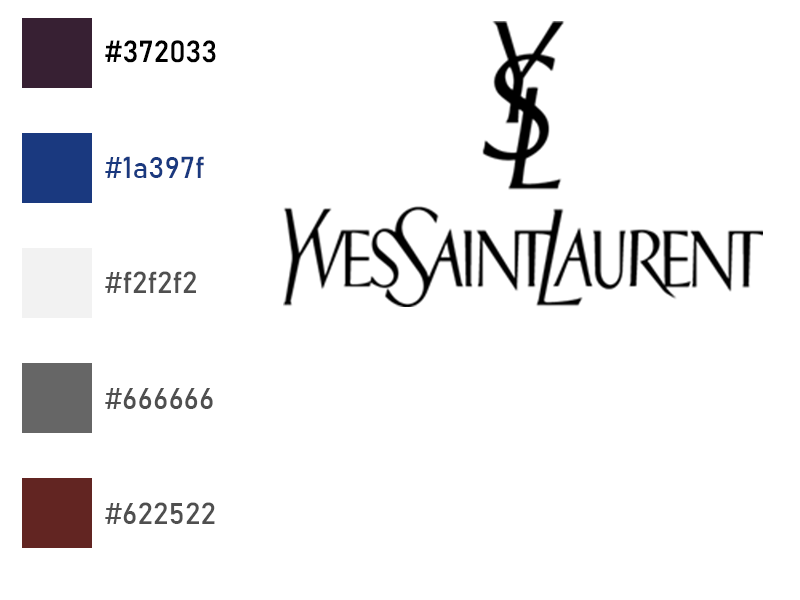
<style>
.page{position:relative;width:800px;height:600px;background:#ffffff}
.page>*{position:absolute;margin:0}
.t1{font:30px "Bahnschrift";color:#000000}
.t2{font:30px "Bahnschrift";color:#1a397f}
.t3{font:30px "Bahnschrift";color:#4f4f4f}
</style>
<div class="page">
<p class="t1" style="left:105px;top:40px;width:111px;height:23px">#372033</p>
<p class="t2" style="left:105px;top:156px;width:99px;height:22px">#1a397f</p>
<p class="t3" style="left:105px;top:271px;width:91px;height:22px">#f2f2f2</p>
<p class="t3" style="left:105px;top:388px;width:108px;height:21px">#666666</p>
<p class="t3" style="left:105px;top:502px;width:110px;height:22px">#622522</p>
</div>
